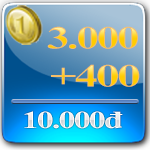
<style>
.page{position:relative;width:150px;height:150px}
.page>*{position:absolute;margin:0}
.t1{font:31.9px "TimesNewRomanPS-BoldMT";letter-spacing:-0.05em;scale:1.42 1}
.t2{font:31.9px "TimesNewRomanPS-BoldMT";letter-spacing:-0.05em;scale:1.48 1}
.t3{font:24.2px "TimesNewRomanPS-BoldMT";letter-spacing:-0.05em;color:#eeeef0;scale:1.39 1}
</style>
<div class="page">
<p class="t1" style="left:47px;top:26px;width:91px;height:23px">3.000</p>
<p class="t2" style="left:51px;top:64px;width:89px;height:23px">+400</p>
<p class="t3" style="left:24px;top:111px;width:99px;height:18px">10.000đ</p>
</div>
